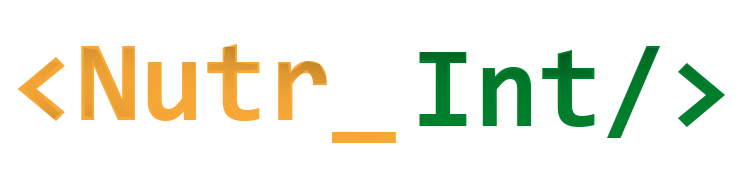
<style>
.page{position:relative;width:743px;height:174px;background:#ffffff}
.page>*{position:absolute;margin:0}
.t1{font:116.4px "Consolas-Bold";color:#f8a836}
.t2{font:116.4px "Consolas-Bold";color:#007f2d}
</style>
<div class="page">
<p class="t1" style="left:17px;top:44px;width:379px;height:99px">&lt;Nutr_</p>
<p class="t2" style="left:419px;top:46px;width:306px;height:92px">Int/&gt;</p>
</div>
